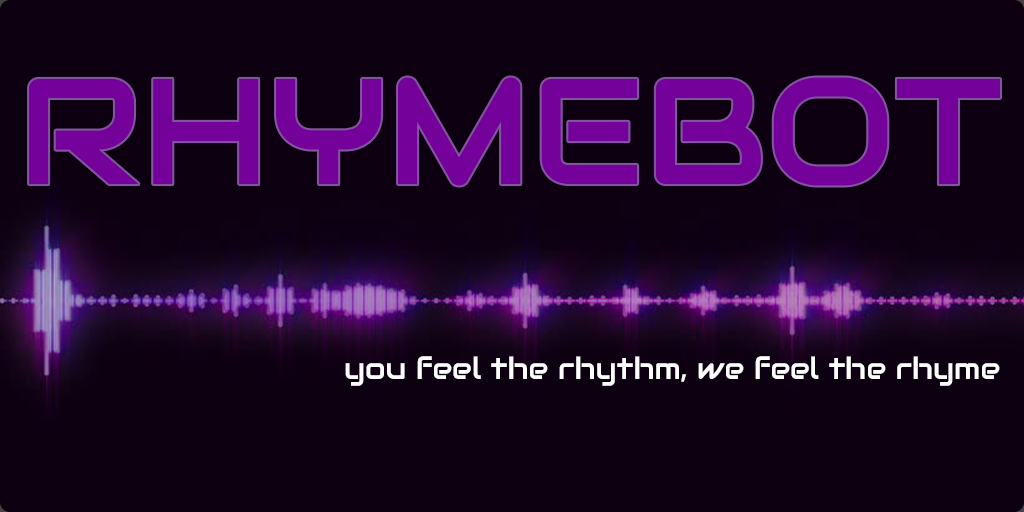
<style>
.page{position:relative;width:1024px;height:512px;background:#0d0111}
.page>*{position:absolute;margin:0}
.t1{font:150px "Audiowide-Regular";color:#74019a}
.t2{font:30px "Audiowide-Regular";color:#ffffff}
</style>
<div class="page">
<p class="t1" style="left:29px;top:77px;width:971px;height:109px">RHYMEBOT</p>
<p class="t2" style="left:345px;top:356px;width:655px;height:30px">you feel the rhythm, we feel the rhyme</p>
</div>
